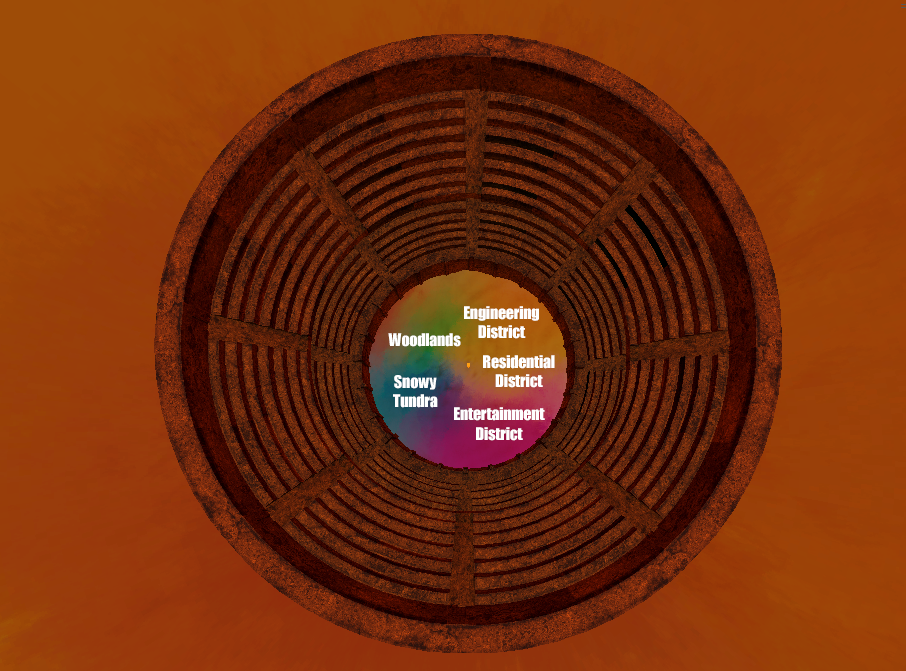
<style>
.page{position:relative;width:906px;height:671px}
.page>*{position:absolute;margin:0}
.t1{font:16px "Impact";color:#ffffff}
</style>
<div class="page">
<p class="t1" style="left:464px;top:306px;width:75px;height:33px;text-align:center">Engineering District</p>
<p class="t1" style="left:388px;top:333px;width:73px;height:14px">Woodlands</p>
<p class="t1" style="left:483px;top:355px;width:72px;height:33px;text-align:center">Residential District</p>
<p class="t1" style="left:393px;top:375px;width:45px;height:33px;text-align:center">Snowy<br>Tundra</p>
<p class="t1" style="left:454px;top:407px;width:91px;height:34px;text-align:center">Entertainment District</p>
</div>
